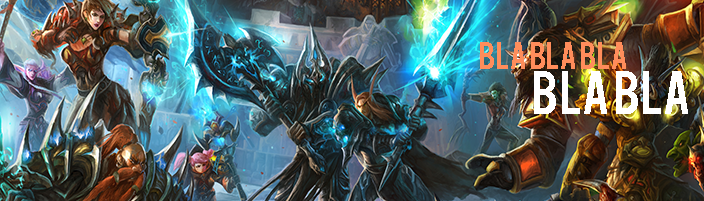
<style>
.page{position:relative;width:704px;height:201px}
.page>*{position:absolute;margin:0}
.t1{font:30px "Bebas";color:#ff8d5b}
.t2{font:48px "Bebas";color:#ffffff}
</style>
<div class="page">
<p class="t1" style="left:480px;top:42px;width:146px;height:27px">bla bla bla</p>
<p class="t2" style="left:534px;top:71px;width:154px;height:43px">bla bla</p>
</div>
